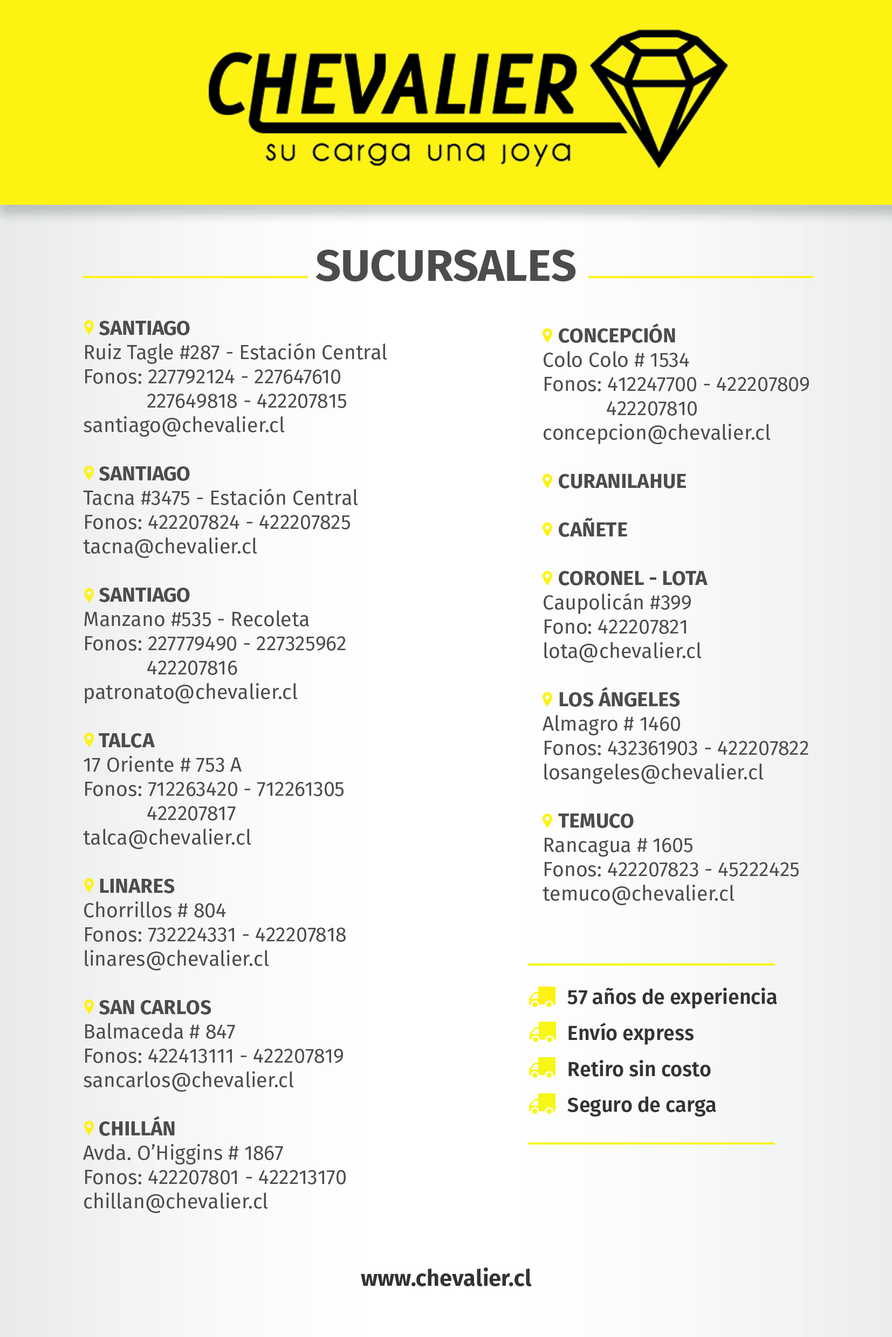
<style>
.page{position:relative;width:892px;height:1337px}
.page>*{position:absolute;margin:0}
.t1{font:44.9px "FiraSans-Bold";color:#4c4c4c;text-transform:uppercase}
.t2{font:20.2px "FiraSans-Regular";color:#4c4c4c}
.t3{font:20.2px "FiraSans-Bold";color:#4c4c4c}
.t4{font:20.2px/35.9px "FiraSans-SemiBold";color:#333333}
.t5{font:22.5px "FiraSans-Bold";color:#333333}
</style>
<div class="page">
<p class="t1" style="left:315px;top:250px;width:261px;height:31px">Sucursales</p>
<p class="t2" style="left:83px;top:321px;width:304px;height:892px"><span class="t3">SANTIAGO<br></span>Ruiz Tagle #287 - Estación Central<br>Fonos: 227792124 - 227647610          227649818 - 422207815 <br>santiago@chevalier.cl<br><br><span class="t3">SANTIAGO<br></span>Tacna #3475 - Estación Central<br>Fonos: 422207824 - 422207825<br>tacna@chevalier.cl<br><br><span class="t3">SANTIAGO<br></span>Manzano #535 - Recoleta<br>Fonos: 227779490 - 227325962         422207816<br>patronato@chevalier.cl<br><br><span class="t3">TALCA<br></span>17 Oriente # 753 A<br>Fonos: 712263420 - 712261305<br>    422207817<br>talca@chevalier.cl<br><br><span class="t3">LINARES<br></span>Chorrillos # 804<br>Fonos: 732224331 - 422207818<br>linares@chevalier.cl<br><br><span class="t3">SAN CARLOS<br></span>Balmaceda # 847<br>Fonos: 422413111 - 422207819<br>sancarlos@chevalier.cl<br><br><span class="t3">CHILLÁN<br></span>Avda. O’Higgins # 1867<br>Fonos: 422207801 - 422213170<br>chillan@chevalier.cl</p>
<p class="t2" style="left:542px;top:323px;width:267px;height:582px"><span class="t3">CONCEPCIÓN<br></span>Colo Colo # 1534<br>Fonos: 412247700 - 422207809          422207810<br>concepcion@chevalier.cl<br><br><span class="t3">CURANILAHUE<br><br>CAÑETE<br><br>CORONEL - LOTA<br></span>Caupolicán #399<br>Fono: 422207821<br>lota@chevalier.cl<br><br><span class="t3">LOS ÁNGELES<br></span>Almagro # 1460<br>Fonos: 432361903 - 422207822 <br>losangeles@chevalier.cl<br><br><span class="t3">TEMUCO<br></span>Rancagua # 1605<br>Fonos: 422207823 - 45222425<br>temuco@chevalier.cl</p>
<p class="t4" style="left:567px;top:988px;width:210px;height:129px">57 años de experiencia<br>  Envío express<br>  Retiro sin costo<br>  Seguro de carga</p>
<p class="t5" style="left:361px;top:1268px;width:171px;height:18px">www.chevalier.cl</p>
</div>
